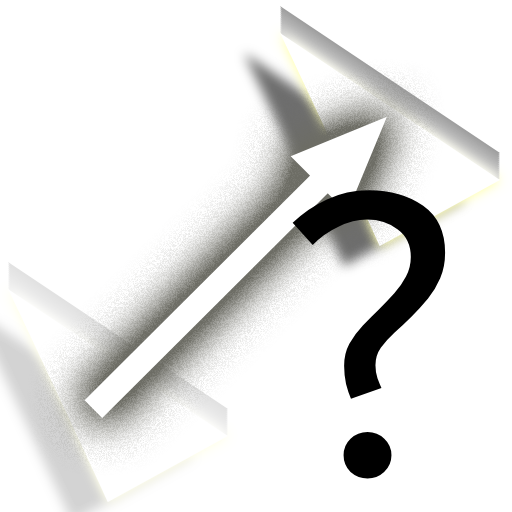
<style>
.page{position:relative;width:512px;height:512px;background:#ffffff}
.page>*{position:absolute;margin:0}
.t1{font:400px "SegoeUIVariable-RegularSmall";color:#000000}
</style>
<div class="page">
<p class="t1" style="left:292px;top:190px;width:154px;height:289px">?</p>
</div>
